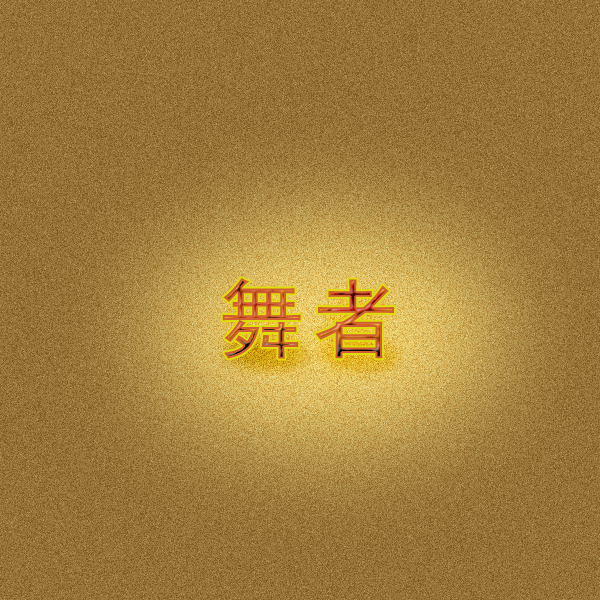
<style>
.page{position:relative;width:600px;height:600px}
.page>*{position:absolute;margin:0}
.t1{font:150px "SimHei";letter-spacing:0.08em;color:#d05e36;text-transform:uppercase}
</style>
<div class="page">
<p class="t1" style="left:222px;top:278px;width:172px;height:81px">舞者</p>
</div>
